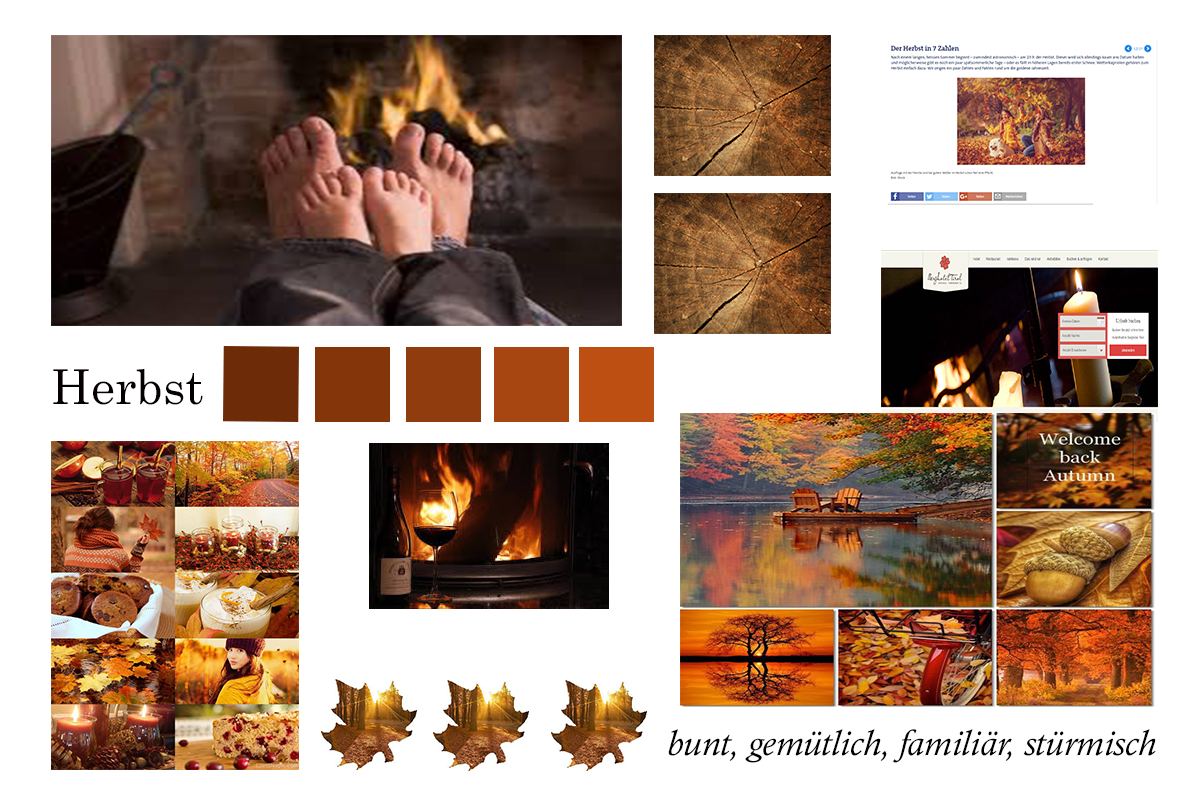
<style>
.page{position:relative;width:1200px;height:800px;background:#ffffff}
.page>*{position:absolute;margin:0}
.t1{font:48px "Century";color:#050003}
.t2{font:36px "CalistoMT-Italic";color:#000000}
.t3{font:36px "Garamond-Italic";color:#ffffff}
</style>
<div class="page">
<p class="t1" style="left:53px;top:369px;width:150px;height:36px">Herbst</p>
<p class="t2" style="left:652px;top:729px;width:504px;height:35px"><span class="t3">f</span>bunt, gemütlich, familiär, stürmisch</p>
</div>
